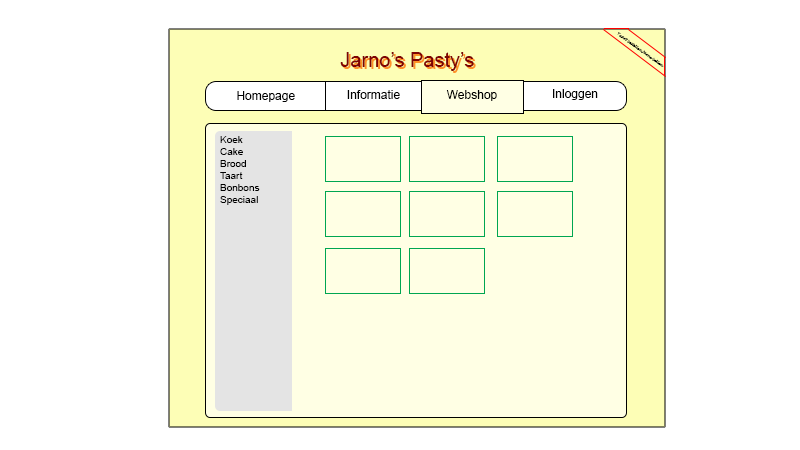
<style>
.page{position:relative;width:800px;height:450px;background:#ffffff}
.page>*{position:absolute;margin:0}
.t1{font:3.5px "LucidaHandwriting-Italic";color:#000000}
.t2{font:20px "ArialMT";color:#7f0303}
.t3{font:20px "ArialMT";color:#ff9227}
.t4{font:12px "ArialMT";color:#000000}
.t5{font:10px "ArialMT";color:#000000}
</style>
<div class="page">
<p class="t1" style="left:617px;top:32px;width:47px;height:35px;rotate:36deg">Taart bestellen Jarno bellen</p>
<p class="t2" style="left:340px;top:52px;width:134px;height:19px">Jarno’s Pasty’s</p>
<p class="t3" style="left:342px;top:54px;width:134px;height:19px">Jarno’s Pasty’s</p>
<p class="t4" style="left:553px;top:89px;width:45px;height:11px">Inloggen</p>
<p class="t4" style="left:237px;top:91px;width:58px;height:11px">Homepage</p>
<p class="t4" style="left:347px;top:90px;width:53px;height:9px">Informatie</p>
<p class="t4" style="left:446px;top:90px;width:51px;height:11px">Webshop</p>
<p class="t5" style="left:220px;top:136px;width:40px;height:69px;text-align:right">Koek<br>Cake<br>Brood<br>Taart<br>Bonbons<br>Speciaal</p>
</div>
